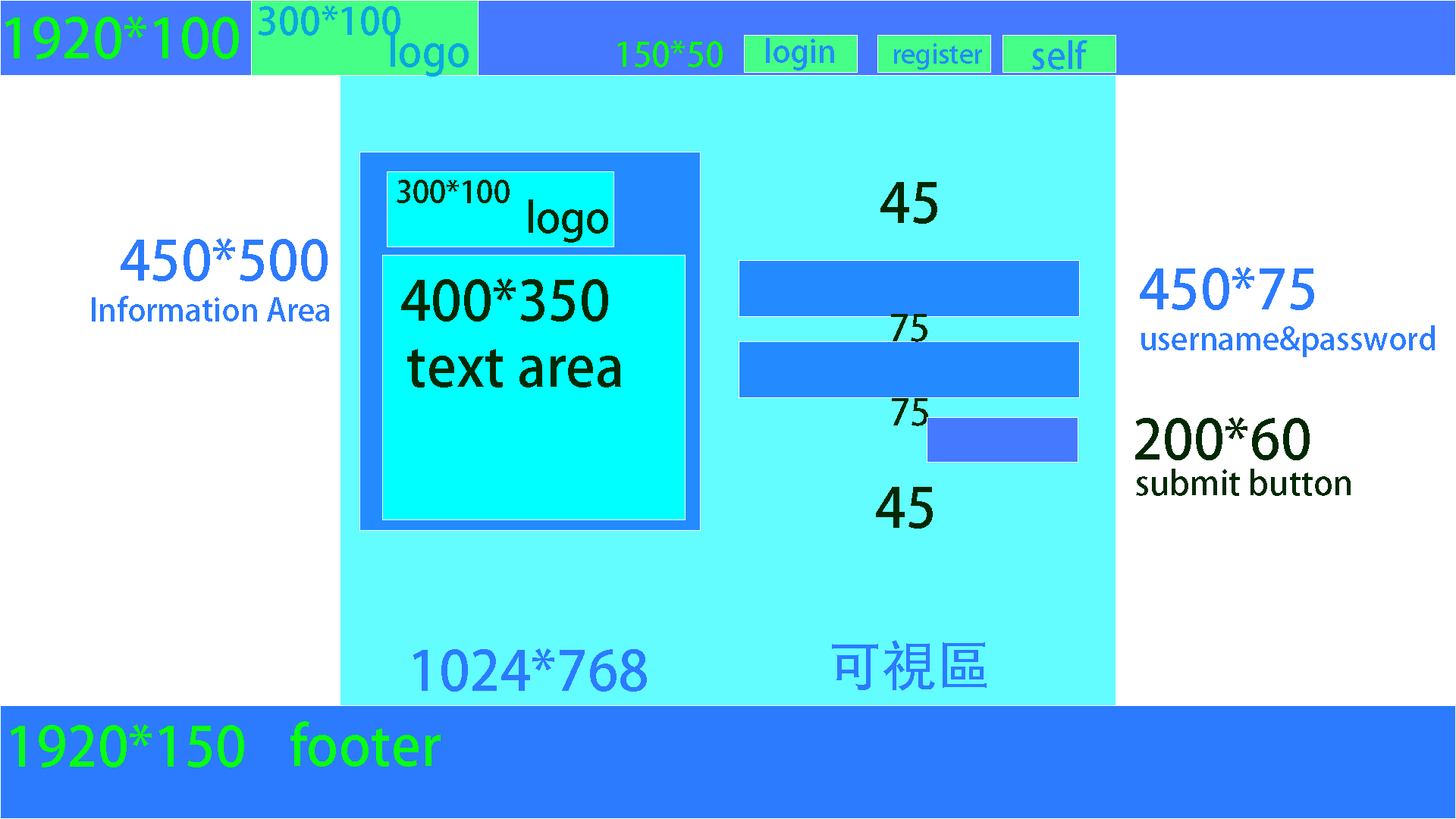
<style>
.page{position:relative;width:1456px;height:819px;background:#ffffff}
.page>*{position:absolute;margin:0}
.t1{font:37.6px "AdobeHeitiStd-Regular";color:#0aa7e1}
.t2{font:54.6px "AdobeHeitiStd-Regular";color:#08ff14}
.t3{font:41px "AdobeHeitiStd-Regular";color:#0aa7e1}
.t4{font:33.6px "AdobeHeitiStd-Regular";color:#0cff0c}
.t5{font:31.1px "AdobeHeitiStd-Regular";color:#238bff}
.t6{font:35.6px "AdobeHeitiStd-Regular";color:#238bff}
.t7{font:26.2px "AdobeHeitiStd-Regular";color:#238bff}
.t8{font:29.8px "AdobeHeitiStd-Regular";color:#002801}
.t9{font:54.6px "AdobeHeitiStd-Regular";color:#002801}
.t10{font:41.2px "AdobeHeitiStd-Regular";color:#002801}
.t11{font:54.6px "AdobeHeitiStd-Regular";color:#2c7bff}
.t12{font:31.2px "AdobeHeitiStd-Regular";color:#2c7bff}
.t13{font:36.1px "AdobeHeitiStd-Regular";color:#002801}
.t14{font:31.1px "AdobeHeitiStd-Regular";color:#2c7bff}
.t15{font:33.4px "AdobeHeitiStd-Regular";color:#002801}
</style>
<div class="page">
<p class="t1" style="left:259px;top:5px;width:141px;height:31px">300*100</p>
<p class="t2" style="left:5px;top:16px;width:234px;height:43px">1920*100</p>
<p class="t3" style="left:391px;top:34px;width:78px;height:43px">logo</p>
<p class="t4" style="left:617px;top:40px;width:106px;height:27px">150*50</p>
<p class="t5" style="left:766px;top:38px;width:68px;height:33px">login</p>
<p class="t6" style="left:1032px;top:40px;width:55px;height:30px">self</p>
<p class="t7" style="left:894px;top:43px;width:88px;height:27px">register</p>
<p class="t8" style="left:397px;top:180px;width:113px;height:23px">300*100</p>
<p class="t9" style="left:880px;top:182px;width:57px;height:42px">45</p>
<p class="t10" style="left:529px;top:199px;width:79px;height:44px">logo</p>
<p class="t11" style="left:121px;top:238px;width:207px;height:43px">450*500</p>
<p class="t11" style="left:1140px;top:267px;width:174px;height:43px">450*75</p>
<p class="t9" style="left:401px;top:278px;width:207px;height:44px">400*350</p>
<p class="t12" style="left:92px;top:296px;width:237px;height:26px">Information Area</p>
<p class="t13" style="left:891px;top:314px;width:36px;height:28px">75</p>
<p class="t14" style="left:1141px;top:325px;width:294px;height:32px">username&amp;password</p>
<p class="t9" style="left:407px;top:349px;width:214px;height:39px">text area</p>
<p class="t13" style="left:892px;top:398px;width:36px;height:28px">75</p>
<p class="t9" style="left:1135px;top:417px;width:175px;height:43px">200*60</p>
<p class="t15" style="left:1136px;top:469px;width:215px;height:27px">submit button</p>
<p class="t9" style="left:876px;top:487px;width:57px;height:42px">45</p>
<p class="t11" style="left:832px;top:640px;width:155px;height:51px">可視區</p>
<p class="t11" style="left:413px;top:648px;width:234px;height:44px">1024*768</p>
<p class="t2" style="left:11px;top:724px;width:233px;height:43px">1920*150</p>
<p class="t2" style="left:290px;top:721px;width:151px;height:46px">footer</p>
</div>
